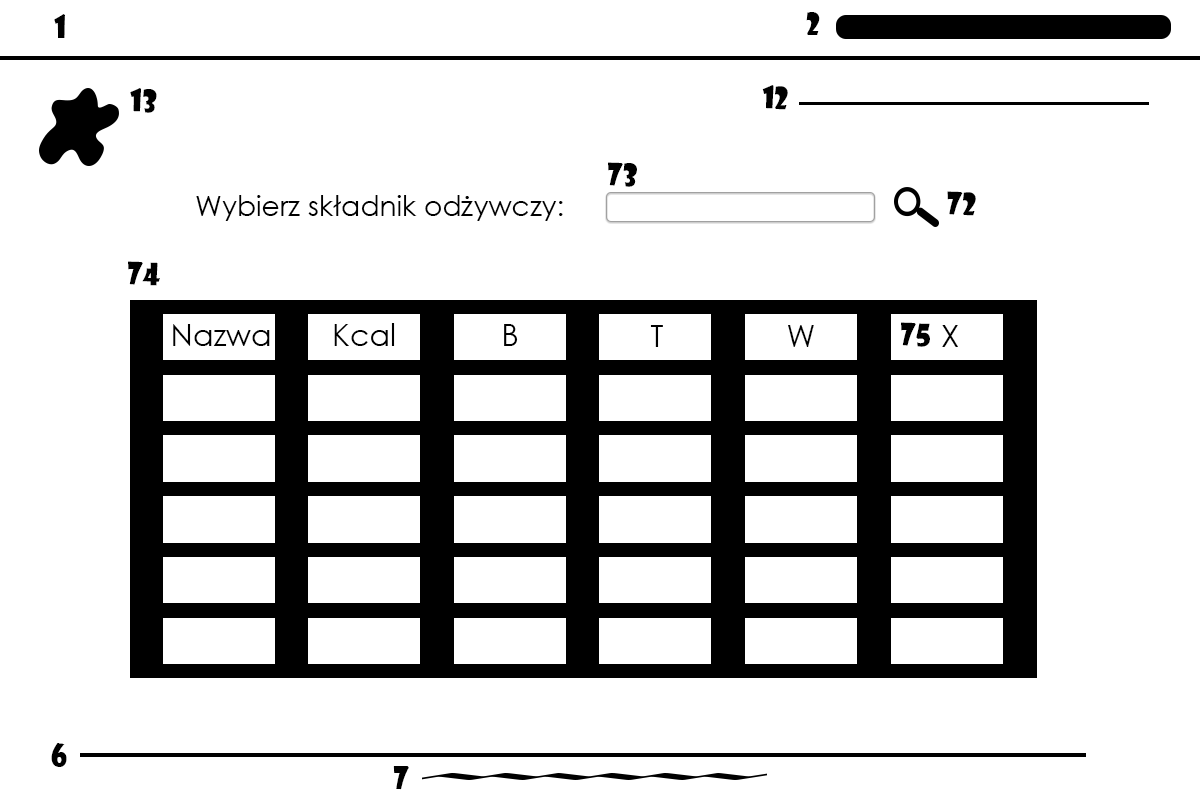
<style>
.page{position:relative;width:1200px;height:800px;background:#ffffff}
.page>*{position:absolute;margin:0}
.t1{font:30px "ShowcardGothic-Reg";color:#000000}
.t2{font:28px "CenturyGothic";color:#000000}
.t3{font:30px "CenturyGothic";color:#000000}
</style>
<div class="page">
<p class="t1" style="left:54px;top:14px;width:11px;height:24px">1</p>
<p class="t1" style="left:806px;top:12px;width:14px;height:23px">2</p>
<p class="t1" style="left:130px;top:88px;width:27px;height:25px;rotate:2deg">13</p>
<p class="t1" style="left:762px;top:85px;width:26px;height:25px;rotate:2deg">12</p>
<p class="t1" style="left:608px;top:162px;width:29px;height:25px;rotate:2deg">73</p>
<p class="t2" style="left:196px;top:195px;width:367px;height:26px">Wybierz składnik odżywczy:</p>
<p class="t1" style="left:947px;top:191px;width:29px;height:25px;rotate:2deg">72</p>
<p class="t1" style="left:128px;top:261px;width:32px;height:25px;rotate:2deg">74</p>
<p class="t3" style="left:173px;top:324px;width:97px;height:22px">Nazwa</p>
<p class="t3" style="left:334px;top:323px;width:61px;height:23px">Kcal</p>
<p class="t3" style="left:504px;top:324px;width:14px;height:22px">B</p>
<p class="t3" style="left:650px;top:325px;width:13px;height:22px">T</p>
<p class="t3" style="left:788px;top:325px;width:26px;height:22px">W</p>
<p class="t1" style="left:901px;top:322px;width:29px;height:25px;rotate:2deg">75</p>
<p class="t3" style="left:942px;top:325px;width:16px;height:22px">X</p>
<p class="t1" style="left:51px;top:743px;width:16px;height:24px">6</p>
<p class="t1" style="left:393px;top:766px;width:16px;height:24px">7</p>
</div>
